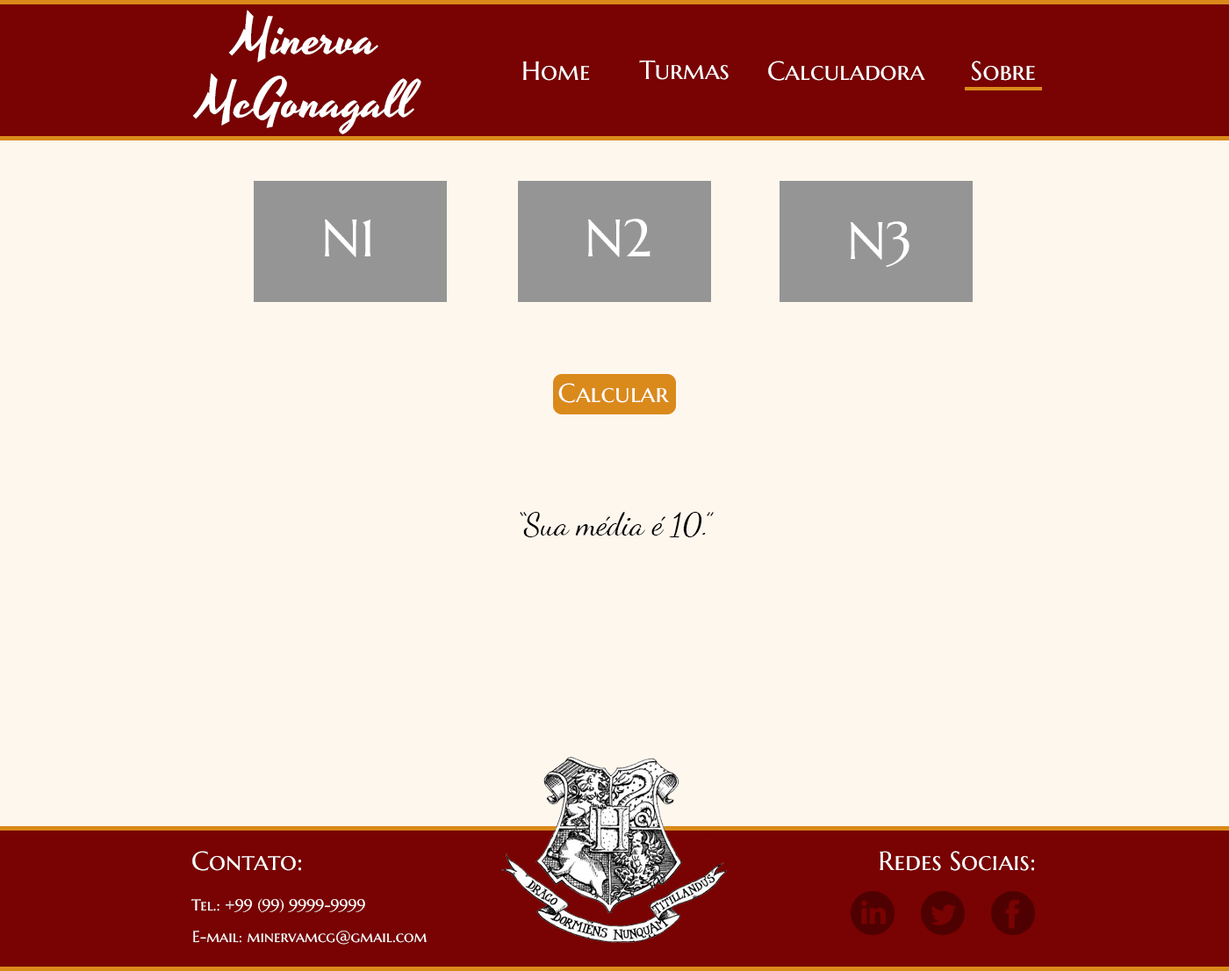
<style>
.page{position:relative;width:1229px;height:971px;background:#fef7ee}
.page>*{position:absolute;margin:0}
.t1{font:52.7px "Yesteryear-Regular";color:#ffffff}
.t2{font:26.3px "MarcellusSC-Regular";color:#ffffff}
.t3{font:52.7px "MarcellusSC-Regular";color:#ffffff}
.t4{font:31.6px "DancingScript";color:#000000}
.t5{font:15.8px "MarcellusSC-Regular";color:#ffffff}
</style>
<div class="page">
<p class="t1" style="left:192px;top:10px;width:229px;height:124px;text-align:center">Minerva<br>McGonagall</p>
<p class="t2" style="left:523px;top:61px;width:67px;height:20px">Home</p>
<p class="t2" style="left:639px;top:60px;width:89px;height:20px">Turmas</p>
<p class="t2" style="left:768px;top:61px;width:157px;height:20px">Calculadora</p>
<p class="t2" style="left:971px;top:61px;width:64px;height:20px">Sobre</p>
<p class="t3" style="left:325px;top:219px;width:46px;height:38px">N1</p>
<p class="t3" style="left:588px;top:219px;width:62px;height:38px">N2</p>
<p class="t3" style="left:850px;top:221px;width:59px;height:46px">N3</p>
<p class="t2" style="left:558px;top:383px;width:111px;height:20px">Calcular</p>
<p class="t4" style="left:520px;top:512px;width:193px;height:25px">“Sua média é 10.”</p>
<p class="t2" style="left:192px;top:850px;width:109px;height:21px">Contato:</p>
<p class="t2" style="left:879px;top:850px;width:155px;height:21px">Redes Sociais:</p>
<p class="t5" style="left:191px;top:898px;width:174px;height:15px">Tel.: +99 (99) 9999-9999</p>
<p class="t5" style="left:193px;top:930px;width:233px;height:14px">E-mail: minervamcg@gmail.com</p>
</div>
